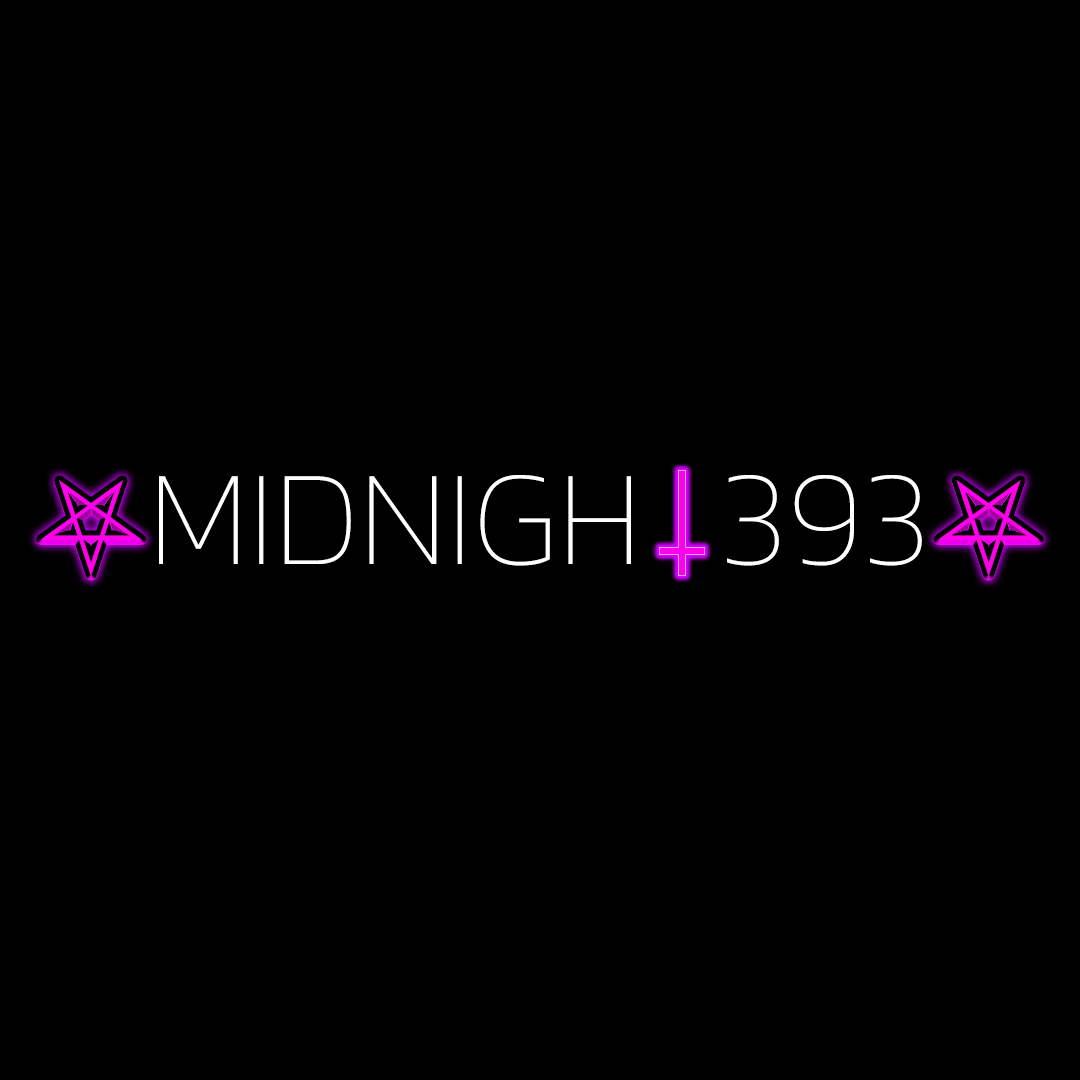
<style>
.page{position:relative;width:1080px;height:1080px;background:#000000}
.page>*{position:absolute;margin:0}
.t1{font:136px "SegoeUISymbol";color:#ff00ea}
.t2{font:136px "Kanit-Thin";color:#ffffff}
.t3{font:136px "Kanit-Thin";color:#000000}
</style>
<div class="page">
<p class="t1" style="left:41px;top:480px;width:998px;height:96px">⛧              ⛧</p>
<p class="t2" style="left:159px;top:475px;width:763px;height:91px">MIDNIGH<span class="t3">T</span>393</p>
</div>
